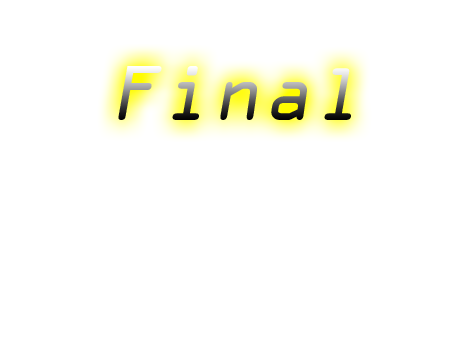
<style>
.page{position:relative;width:454px;height:340px;background:#ffffff}
.page>*{position:absolute;margin:0}
.t1{font:70px "OCRAStd";font-style:italic}
</style>
<div class="page">
<p class="t1" style="left:118px;top:66px;width:233px;height:54px">Final</p>
</div>
